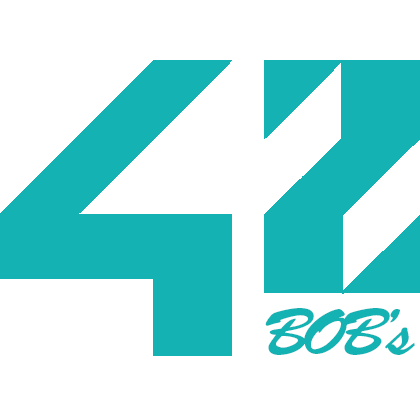
<style>
.page{position:relative;width:420px;height:420px;background:#ffffff}
.page>*{position:absolute;margin:0}
.t1{font:65.8px "BrushScriptStd";letter-spacing:-0.1em;color:#15b2b3}
</style>
<div class="page">
<p class="t1" style="left:265px;top:308px;width:150px;height:47px">BOB’s</p>
</div>
